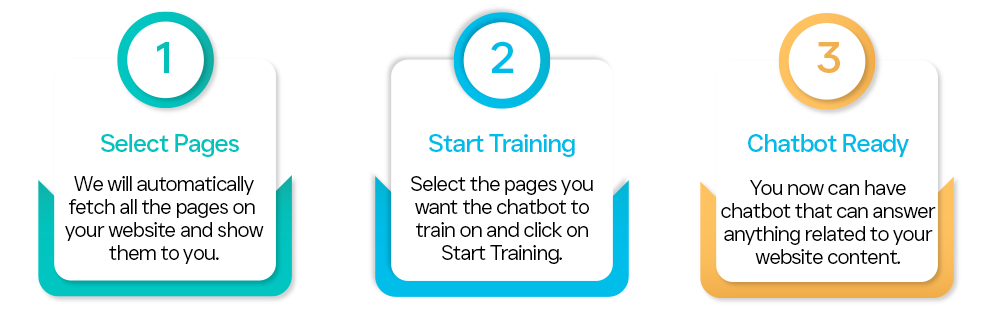
<style>
.page{position:relative;width:998px;height:314px;background:#ffffff}
.page>*{position:absolute;margin:0}
.t1{font:44px "JUSTSans-Md";letter-spacing:-0.045em;color:#00bce9}
.t2{font:44px "JUSTSans-Md";letter-spacing:-0.045em;color:#05bfb9}
.t3{font:44px "JUSTSans-Md";letter-spacing:-0.045em;color:#f1af4d}
.t4{font:25px "JUSTSans-Md";letter-spacing:-0.045em;color:#02c3bd}
.t5{font:25px "JUSTSans-Md";letter-spacing:-0.045em;color:#00bce9}
.t6{font:21px/23px "JUSTSans-Lt";letter-spacing:-0.045em;color:#000000}
</style>
<div class="page">
<p class="t1" style="left:491px;top:41px;width:23px;height:32px">2</p>
<p class="t2" style="left:157px;top:42px;width:12px;height:31px">1</p>
<p class="t3" style="left:817px;top:42px;width:23px;height:31px">3</p>
<p class="t4" style="left:101px;top:134px;width:138px;height:23px">Select Pages</p>
<p class="t5" style="left:429px;top:134px;width:146px;height:23px">Start Training</p>
<p class="t5" style="left:748px;top:134px;width:161px;height:23px">Chatbot Ready</p>
<p class="t6" style="left:65px;top:176px;width:199px;height:88px;text-align:center">We will automatically<br>fetch all the pages on <br>your website and show<br>them to you.</p>
<p class="t6" style="left:411px;top:176px;width:182px;height:88px;text-align:center">Select the pages you<br>want the chatbot to<br>train on and click on<br>Start Training.</p>
<p class="t6" style="left:721px;top:180px;width:215px;height:84px;text-align:center">You now can have<br>chatbot that can answer<br>anything related to your<br>website content.</p>
</div>
